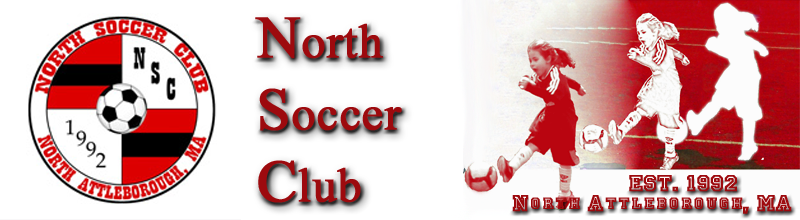
<style>
.page{position:relative;width:800px;height:220px;background:#ffffff}
.page>*{position:absolute;margin:0}
.t1{font:48px "David";color:#9d0a0e;font-weight:bold}
.t2{font:60px "David";color:#9d0a0e;font-weight:bold}
.t3{font:24px "BRIA-Normal";color:#9d0a0e;font-weight:bold}
</style>
<div class="page">
<p class="t1" style="left:255px;top:17px;width:147px;height:186px"><span class="t2">N</span>orth<br><span class="t2">S</span>occer<br><span class="t2">C</span>lub</p>
<p class="t3" style="left:629px;top:175px;width:108px;height:17px">EST. 1992</p>
<p class="t3" style="left:512px;top:195px;width:280px;height:19px">North Attleborough, MA</p>
</div>
